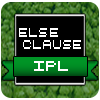
<style>
.page{position:relative;width:100px;height:100px;background:#000000}
.page>*{position:absolute;margin:0}
.t1{font:12px "Petyka-RetroComputer___SHORT";color:#ffffff}
.t2{font:14px "Petyka-RetroComputer___SHORT";color:#ffffff}
</style>
<div class="page">
<p class="t1" style="left:19px;top:28px;width:39px;height:9px">ELSE</p>
<p class="t1" style="left:23px;top:40px;width:58px;height:9px">clause</p>
<p class="t2" style="left:34px;top:61px;width:34px;height:10px">IPL</p>
</div>
